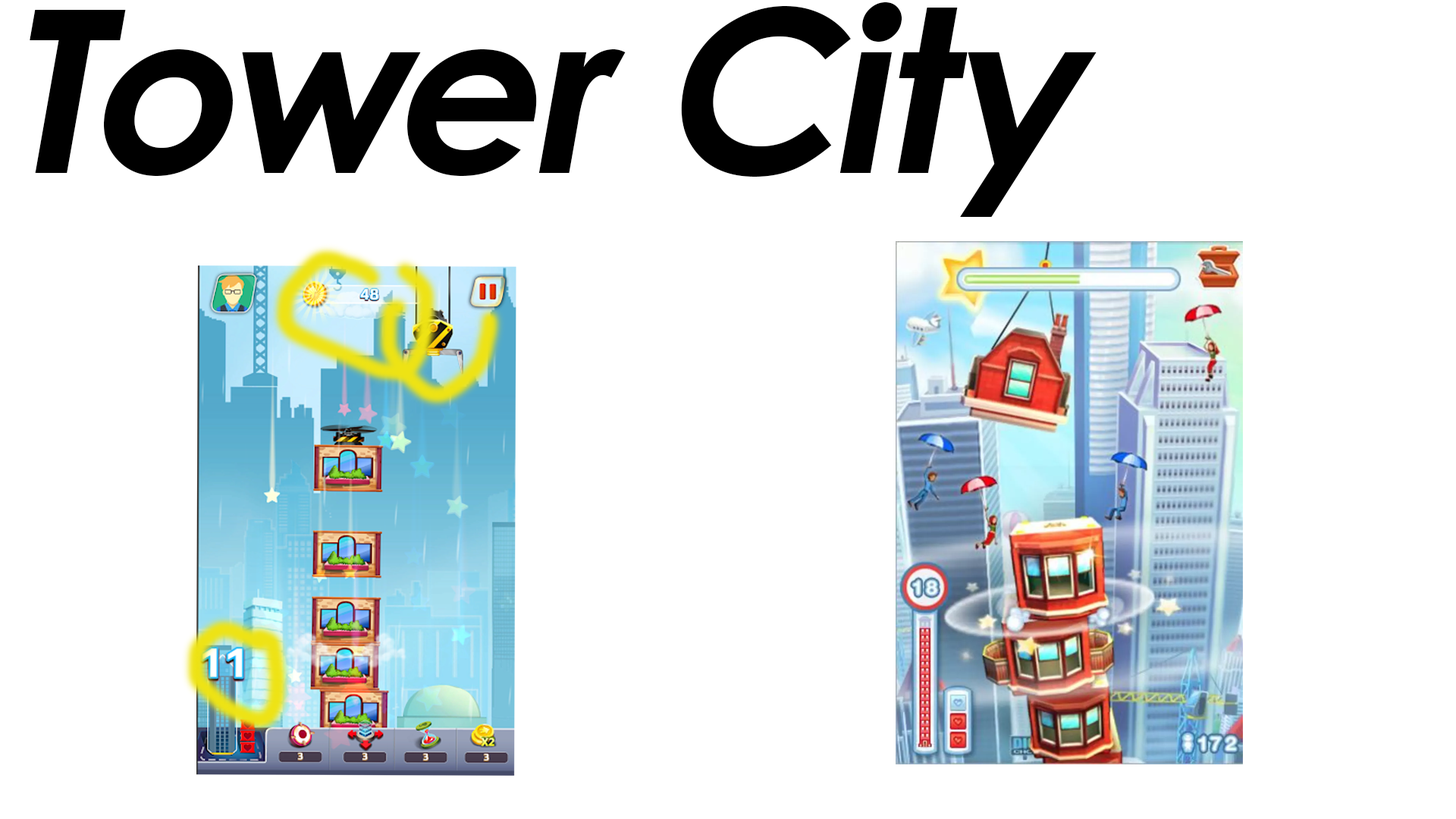
<style>
.page{position:relative;width:1456px;height:819px;background:#ffffff}
.page>*{position:absolute;margin:0}
.t1{font:227.5px "CenturyGothic-Bold";letter-spacing:-0.02em;color:#000000;font-style:italic}
</style>
<div class="page">
<p class="t1" style="left:30px;top:2px;width:1067px;height:215px">Tower City</p>
</div>
